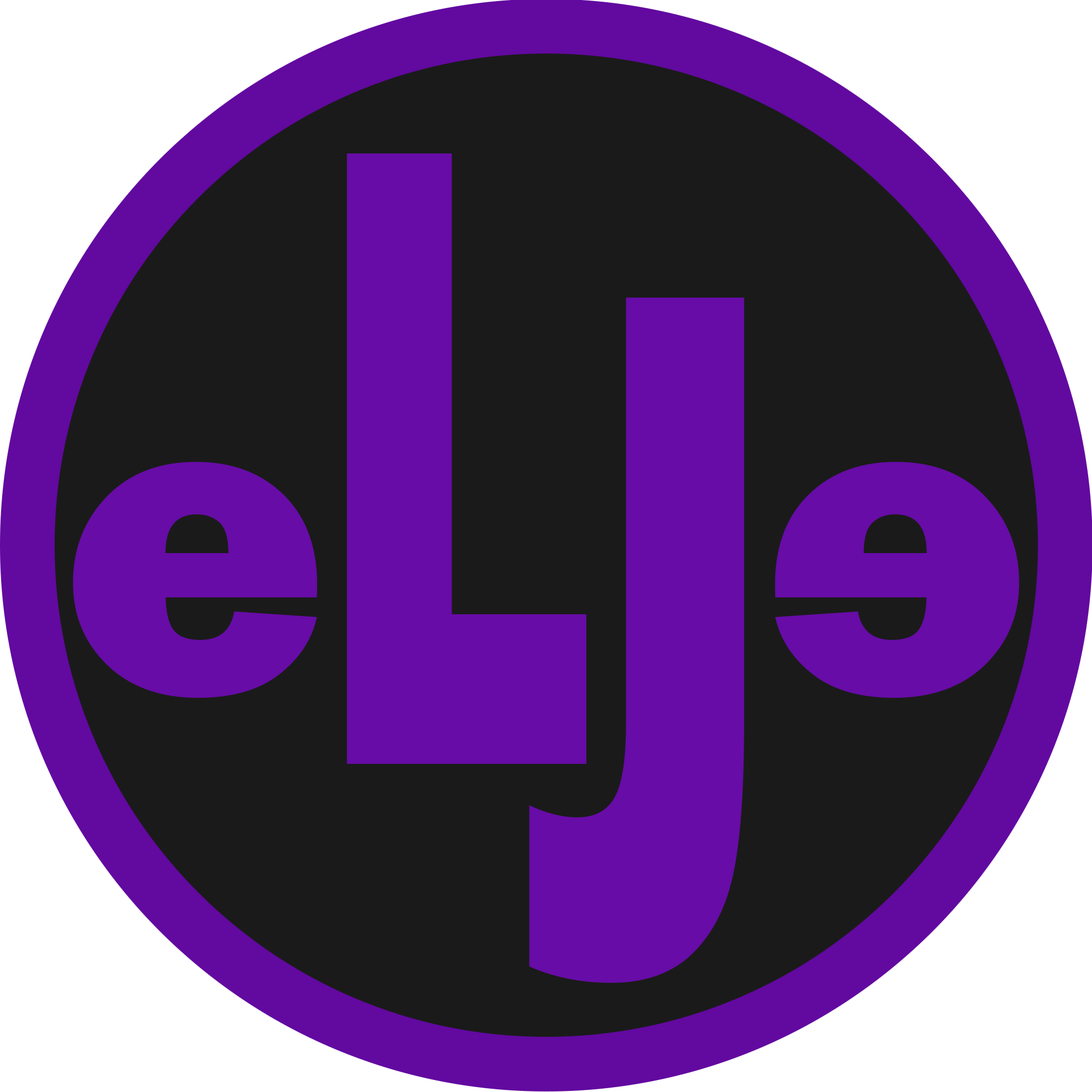
<style>
.page{position:relative;width:1092px;height:1092px;background:#1a1a1a}
.page>*{position:absolute;margin:0}
.t1{font:916.4px "FranklinGothic-Heavy";color:#670ca7;scale:0.56 1}
.t2{font:1012.9px "FranklinGothic-Heavy";color:#670ca7;scale:0.59 1}
.t3{font:455px "FranklinGothic-Heavy";color:#670ca7}
</style>
<div class="page">
<p class="t1" style="left:347px;top:153px;width:239px;height:611px">L</p>
<p class="t2" style="left:529px;top:298px;width:215px;height:685px">J</p>
<p class="t3" style="left:73px;top:462px;width:244px;height:236px">e</p>
<p class="t3" style="left:775px;top:462px;width:244px;height:236px;rotate:180deg">e</p>
</div>
